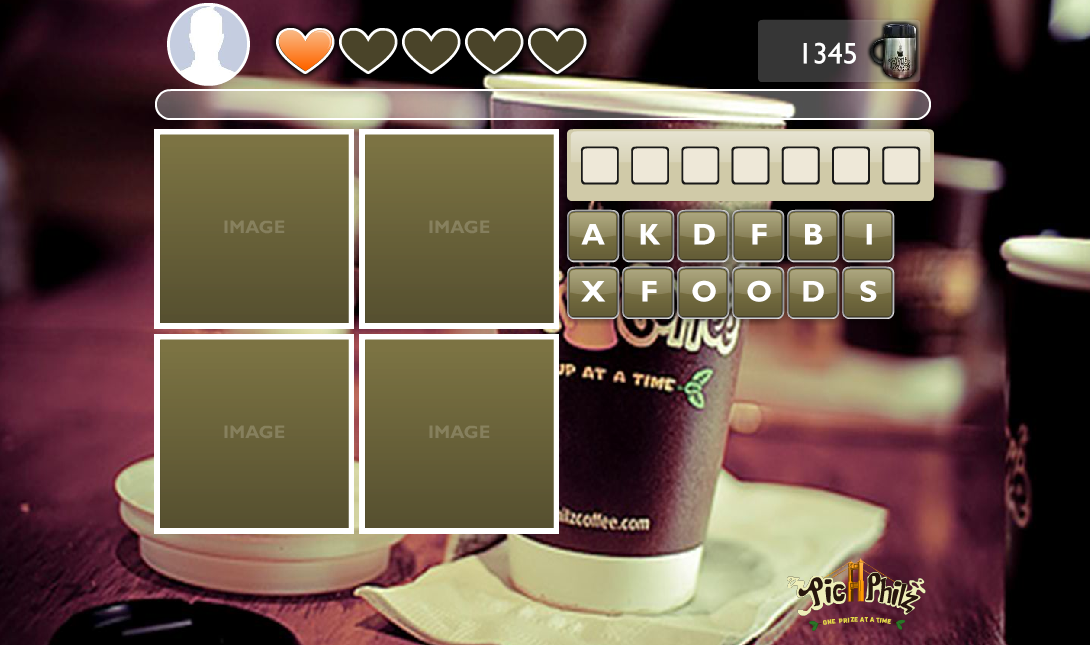
<style>
.page{position:relative;width:1090px;height:645px}
.page>*{position:absolute;margin:0}
.t1{font:30px "GillSansStd";color:#ffffff}
.t2{font:30px "GillSansStd-Bold";color:#ffffff}
</style>
<div class="page">
<p class="t1" style="left:803px;top:42px;width:53px;height:22px">1345</p>
<p class="t2" style="left:581px;top:224px;width:24px;height:21px">A</p>
<p class="t2" style="left:640px;top:224px;width:21px;height:21px">K</p>
<p class="t2" style="left:694px;top:224px;width:21px;height:21px">D</p>
<p class="t2" style="left:752px;top:224px;width:15px;height:21px">F</p>
<p class="t2" style="left:805px;top:224px;width:18px;height:21px">B</p>
<p class="t2" style="left:866px;top:224px;width:6px;height:21px">I</p>
<p class="t2" style="left:581px;top:281px;width:25px;height:21px">X</p>
<p class="t2" style="left:642px;top:281px;width:15px;height:21px">F</p>
<p class="t2" style="left:692px;top:280px;width:24px;height:22px">O</p>
<p class="t2" style="left:747px;top:280px;width:24px;height:22px">O</p>
<p class="t2" style="left:803px;top:281px;width:21px;height:21px">D</p>
<p class="t2" style="left:860px;top:280px;width:17px;height:22px">S</p>
</div>
